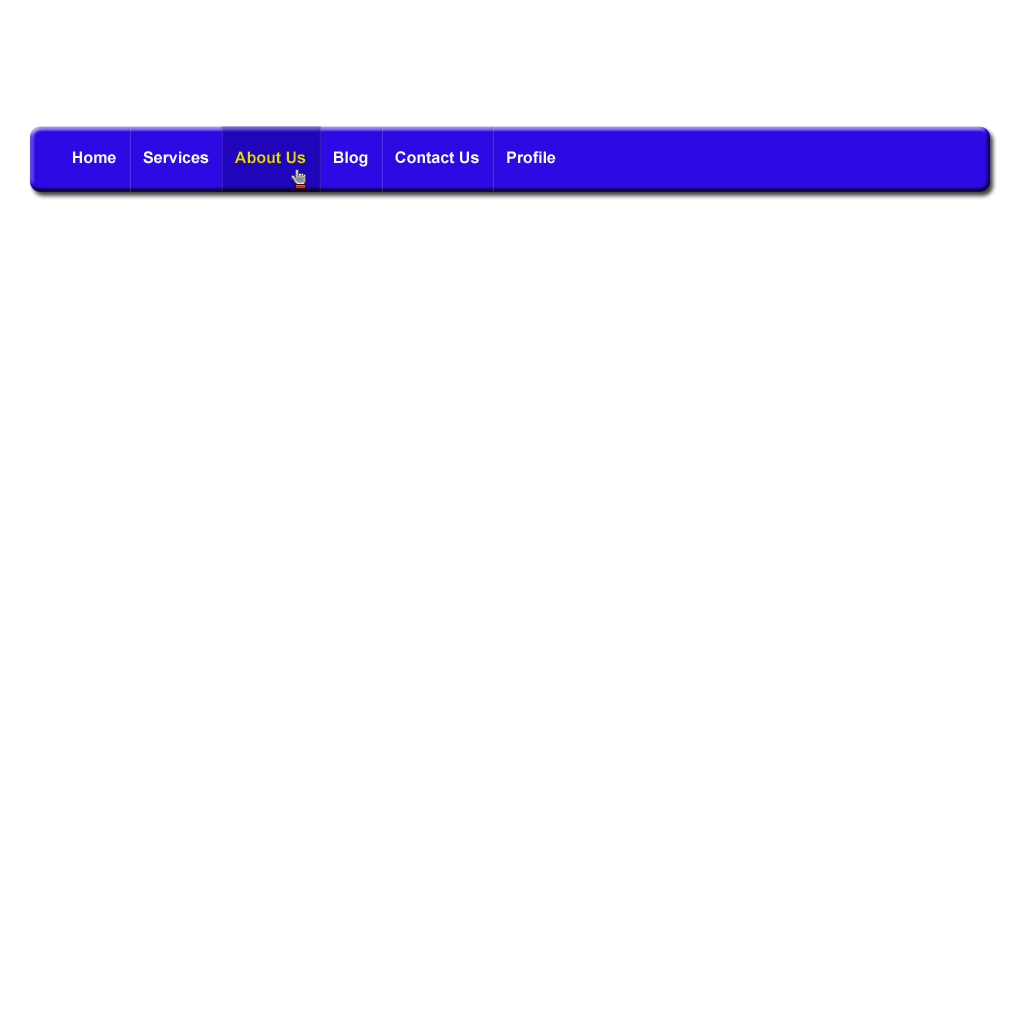
<style>
.page{position:relative;width:1020px;height:1020px;background:#ffffff}
.page>*{position:absolute;margin:0}
.t1{font:16px "Arial-BoldMT";color:#fbfbfc}
.t2{font:16px "Arial-BoldMT";color:#f8f400}
</style>
<div class="page">
<p class="t1" style="left:73px;top:151px;width:483px;height:16px">Home      Services      <span class="t2">About Us</span>      Blog      Contact Us      Profile</p>
</div>
